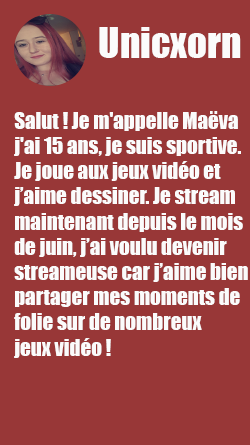
<style>
.page{position:relative;width:250px;height:445px;background:#983737}
.page>*{position:absolute;margin:0}
.t1{font:39.2px "Impact";color:#fbfbfb}
.t2{font:21px "Impact";color:#fbfbfb}
</style>
<div class="page">
<p class="t1" style="left:99px;top:27px;width:142px;height:31px">Unicxorn</p>
<p class="t2" style="left:14px;top:111px;width:234px;height:247px">Salut ! Je m'appelle Maëva<br>j'ai 15 ans, je suis sportive. <br>Je joue aux jeux vidéo et <br>j’aime dessiner. Je stream <br>maintenant depuis le mois <br>de juin, j’ai voulu devenir <br>streameuse car j’aime bien <br>partager mes moments de <br>folie sur de nombreux <br>jeux vidéo !</p>
</div>
